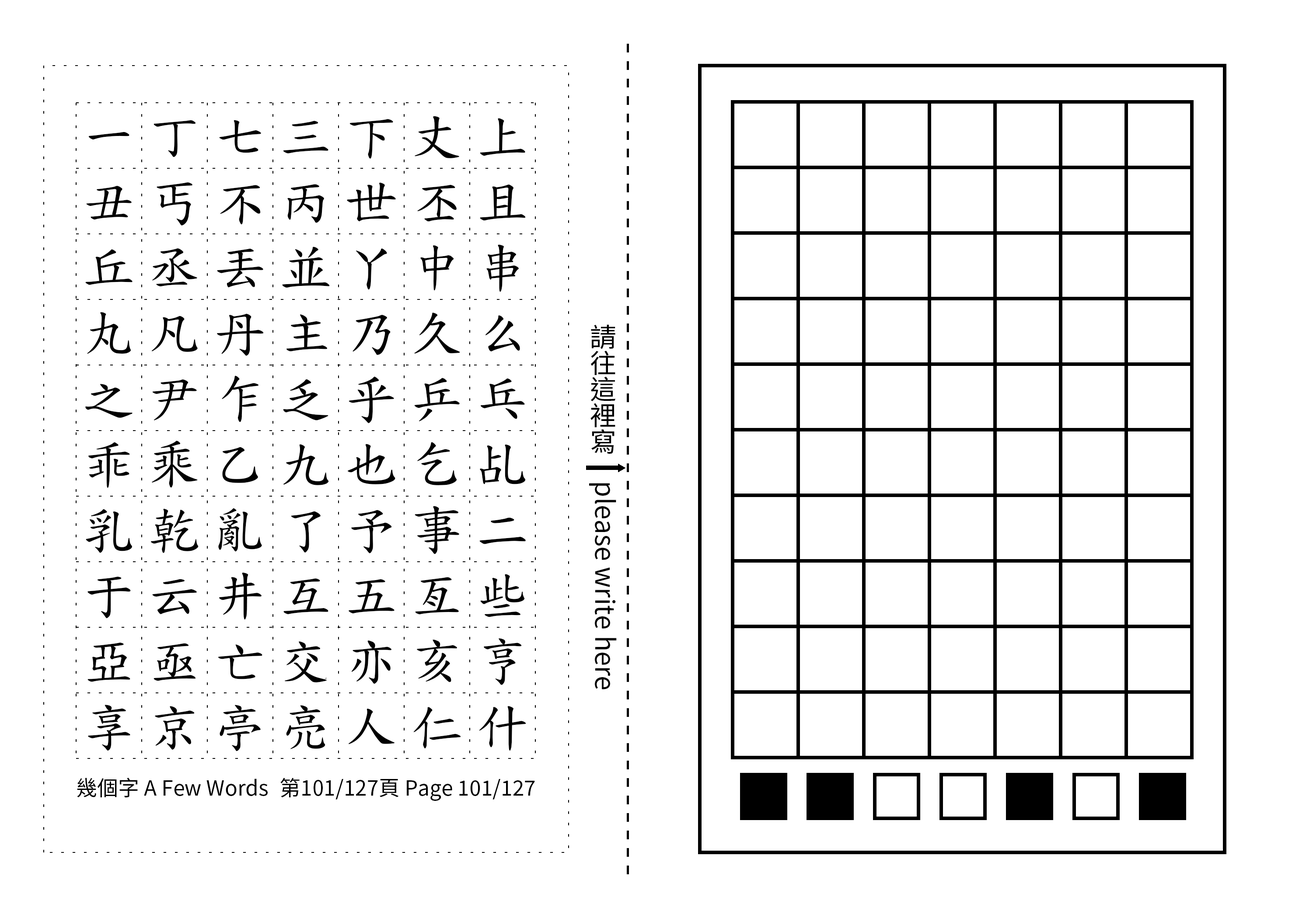
<style>
.page{position:relative;width:1299px;height:918px;background:#ffffff}
.page>*{position:absolute;margin:0}
.t1{font:52.5px/65.6px "TW-Kai-98_1";letter-spacing:0.25em;color:#000000}
.t2{font:26.2px "SourceHanSansTC-Regular";color:#000000}
.t3{font:21px "SourceHanSansTC-Regular";color:#000000}
</style>
<div class="page">
<p class="t1" style="left:85px;top:116px;width:441px;height:636px;text-align:center">一丁七三下丈上丑丐不丙世丕且丘丞丟並丫中串丸凡丹主乃久么之尹乍乏乎乒乓乖乘乙九也乞乩乳乾亂了予事二于云井互五亙些亞亟亡交亦亥亨享京亭亮人仁什</p>
<p class="t2" style="left:589px;top:324px;width:28px;height:366px;text-align:center">請往這裡寫　please write here</p>
<p class="t3" style="left:77px;top:778px;width:191px;height:20px">幾個字 A Few Words</p>
<p class="t3" style="left:280px;top:778px;width:255px;height:23px">第101/127頁 Page 101/127</p>
</div>
